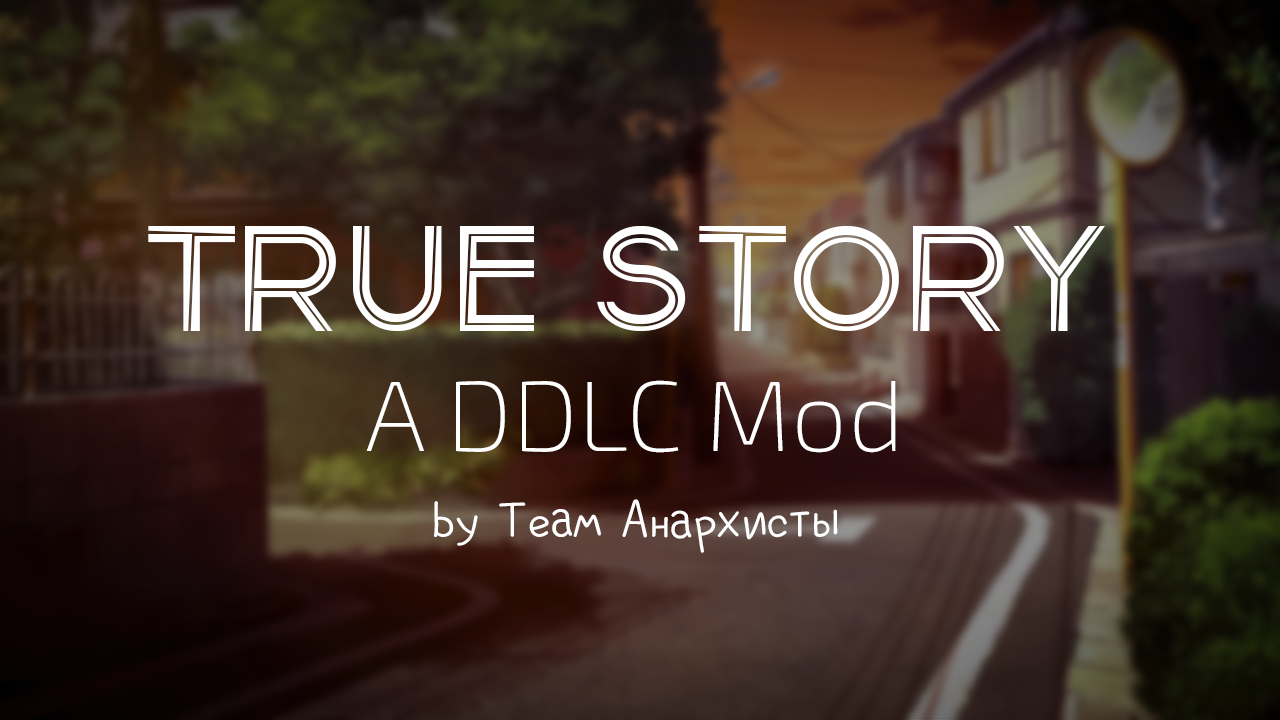
<style>
.page{position:relative;width:1280px;height:720px}
.page>*{position:absolute;margin:0}
.t1{font:72px "Brusnikanormal";color:#ffffff}
.t2{font:150px "Capitellum-Tough";color:#ffffff}
.t3{font:100px "Exo2-ExtraLight";color:#ffffff}
</style>
<div class="page">
<p class="t1" style="left:148px;top:226px;width:957px;height:327px;text-align:center"><span class="t2">true story<br></span><span class="t3">A DDLC Mod<br></span>by Team Анархисты</p>
</div>
